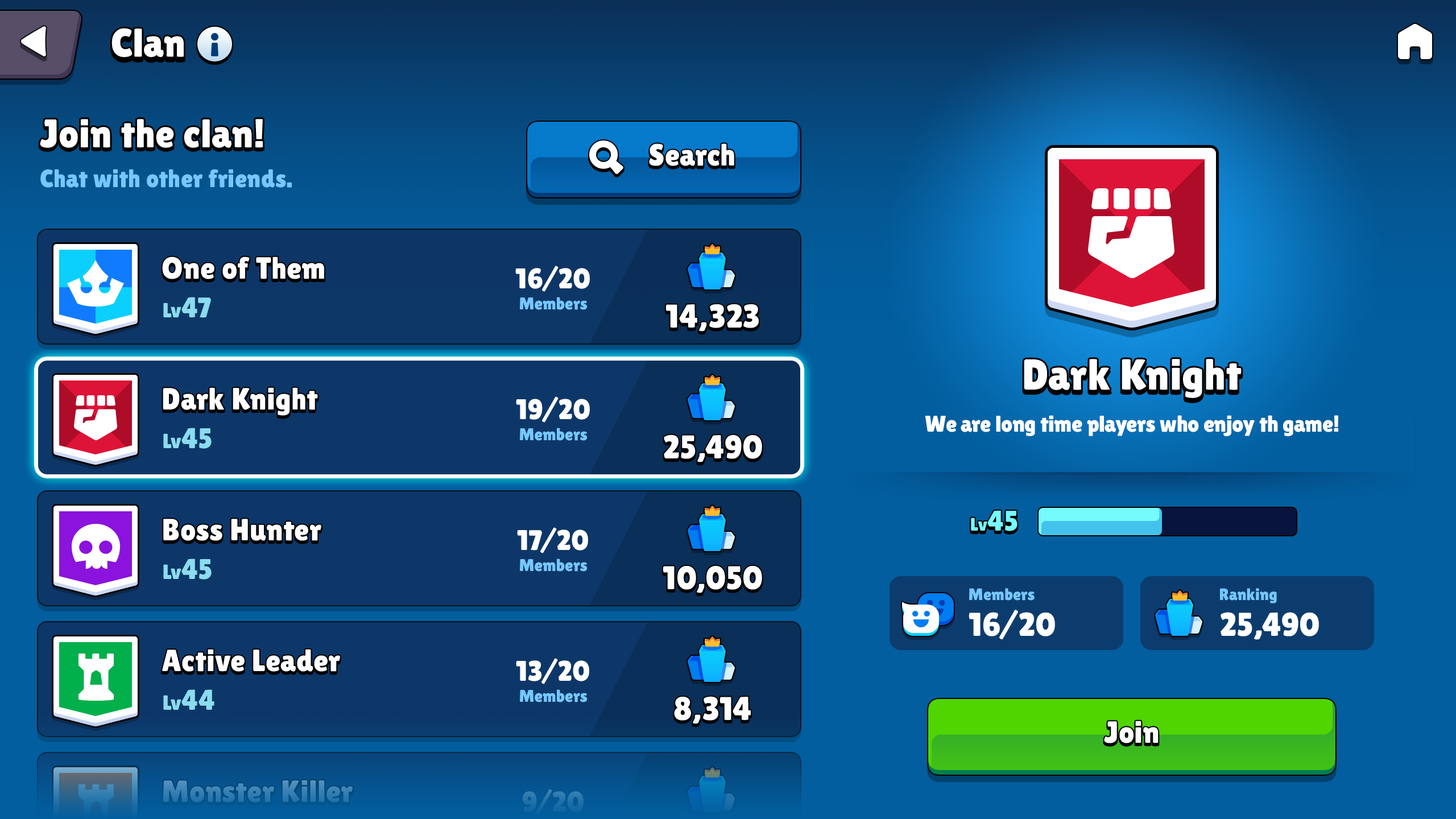
<style>
.page{position:relative;width:1456px;height:819px}
.page>*{position:absolute;margin:0}
.t1{font:39.8px "LilitaOne";color:#ffffff}
.t2{font:39.8px "LilitaOne";letter-spacing:0.02em;color:#ffffff}
.t3{font:30.7px "LilitaOne";letter-spacing:0.02em;color:#ffffff}
.t4{font:25px "LilitaOne";letter-spacing:0.02em;color:#76c7ff}
.t5{font:28.4px "LilitaOne";letter-spacing:0.02em;color:#ffffff}
.t6{font:20.5px "LilitaOne";letter-spacing:0.02em;color:#8bdcef}
.t7{font:28.4px "LilitaOne";letter-spacing:0.02em;color:#8bdcef}
.t8{font:17.1px "LilitaOne";letter-spacing:0.02em;color:#76c7ff}
.t9{font:33px "LilitaOne";letter-spacing:0.02em;color:#ffffff}
.t10{font:43.2px "LilitaOne";letter-spacing:0.02em;color:#ffffff}
.t11{font:22.7px "LilitaOne";color:#ffffff}
.t12{font:18.2px "LilitaOne";letter-spacing:0.02em;color:#76fbfd}
.t13{font:28.4px "LilitaOne";letter-spacing:0.02em;color:#76fbfd}
.t14{font:16.5px "LilitaOne";letter-spacing:0.02em;color:#76c7ff}
.t15{font:30.7px "LilitaOne";letter-spacing:0.02em;color:#367fb2}
.t16{font:28.4px "LilitaOne";letter-spacing:0.02em;color:#2172aa}
</style>
<div class="page">
<p class="t1" style="left:111px;top:28px;width:73px;height:29px">Clan</p>
<p class="t2" style="left:40px;top:119px;width:223px;height:29px">Join the clan!</p>
<p class="t3" style="left:649px;top:143px;width:85px;height:23px">Search</p>
<p class="t4" style="left:40px;top:169px;width:252px;height:19px">Chat with other friends.</p>
<p class="t3" style="left:162px;top:257px;width:162px;height:22px">One of Them</p>
<p class="t5" style="left:515px;top:266px;width:75px;height:26px">16/20</p>
<p class="t6" style="left:163px;top:297px;width:48px;height:21px">Lv<span class="t7">47</span></p>
<p class="t8" style="left:520px;top:297px;width:68px;height:13px">Members</p>
<p class="t9" style="left:665px;top:304px;width:94px;height:28px">14,323</p>
<p class="t10" style="left:1024px;top:359px;width:218px;height:39px">Dark Knight</p>
<p class="t3" style="left:163px;top:387px;width:155px;height:29px">Dark Knight</p>
<p class="t5" style="left:516px;top:396px;width:74px;height:27px">19/20</p>
<p class="t11" style="left:925px;top:415px;width:413px;height:21px">We are long time players who enjoy th game!</p>
<p class="t6" style="left:163px;top:428px;width:49px;height:21px">Lv<span class="t7">45</span></p>
<p class="t8" style="left:520px;top:428px;width:68px;height:13px">Members</p>
<p class="t9" style="left:664px;top:435px;width:98px;height:27px">25,490</p>
<p class="t3" style="left:163px;top:519px;width:158px;height:22px">Boss Hunter</p>
<p class="t12" style="left:971px;top:510px;width:46px;height:21px">Lv<span class="t13">45</span></p>
<p class="t5" style="left:517px;top:527px;width:71px;height:26px">17/20</p>
<p class="t6" style="left:163px;top:559px;width:49px;height:21px">Lv<span class="t7">45</span></p>
<p class="t8" style="left:520px;top:559px;width:68px;height:13px">Members</p>
<p class="t9" style="left:663px;top:566px;width:99px;height:27px">10,050</p>
<p class="t14" style="left:969px;top:588px;width:66px;height:13px">Members</p>
<p class="t14" style="left:1220px;top:588px;width:57px;height:15px">Ranking</p>
<p class="t9" style="left:969px;top:610px;width:86px;height:29px">16/20</p>
<p class="t9" style="left:1221px;top:612px;width:98px;height:28px">25,490</p>
<p class="t3" style="left:162px;top:649px;width:178px;height:23px">Active Leader</p>
<p class="t5" style="left:516px;top:658px;width:73px;height:26px">13/20</p>
<p class="t6" style="left:163px;top:689px;width:51px;height:21px">Lv<span class="t7">44</span></p>
<p class="t8" style="left:520px;top:689px;width:68px;height:13px">Members</p>
<p class="t9" style="left:674px;top:696px;width:77px;height:28px">8,314</p>
<p class="t3" style="left:1104px;top:721px;width:55px;height:22px">Join</p>
<p class="t15" style="left:163px;top:780px;width:190px;height:22px">Monster Killer</p>
<p class="t16" style="left:523px;top:789px;width:61px;height:26px">9/20</p>
</div>
